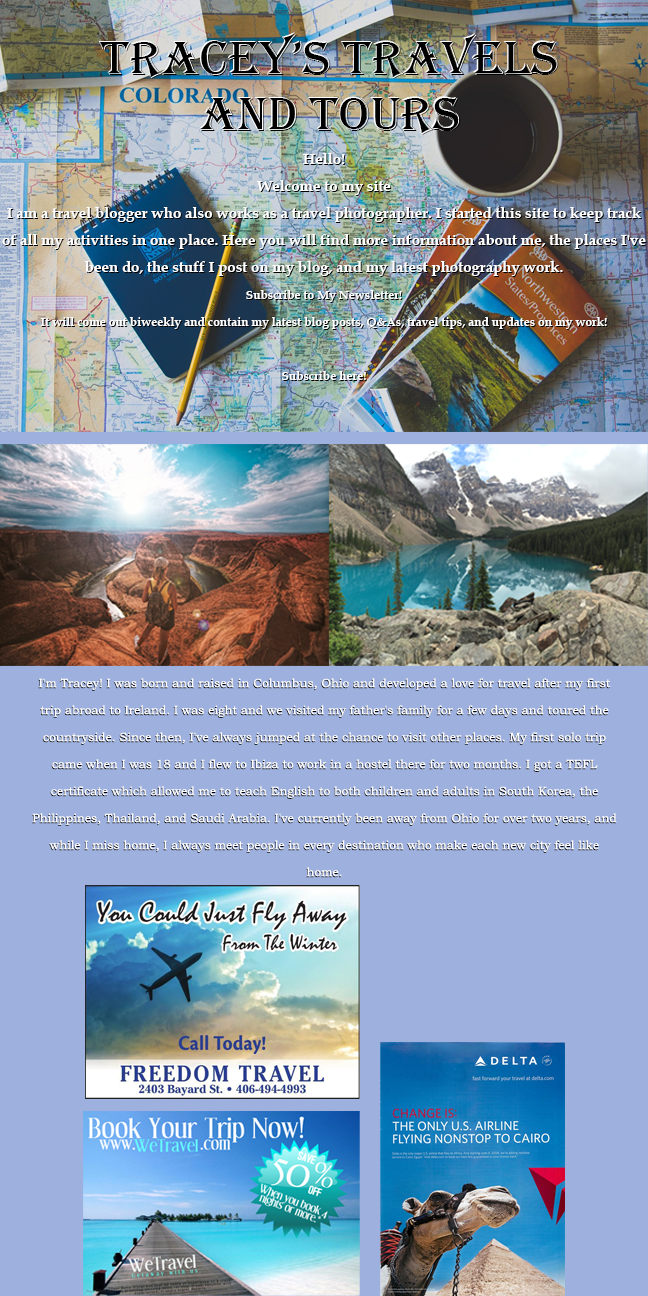
<style>
.page{position:relative;width:648px;height:1296px;background:#9eb0dd}
.page>*{position:absolute;margin:0}
.t1{font:50px/56px "Algerian";color:#000000}
.t2{font:15px/27px "BookAntiqua-Bold";color:#ffffff}
.t3{font:12px/27px "BookAntiqua-Bold";color:#ffffff}
.t4{font:15px/27px "BookAntiqua-Bold";color:#000000}
.t5{font:12px/27px "BookmanOldStyle";color:#ffffff}
.t6{font:12px/27px "BookmanOldStyle"}
</style>
<div class="page">
<p class="t1" style="left:100px;top:33px;width:459px;height:102px;text-align:center">Tracey’s Travels and Tours</p>
<p class="t2" style="left:2px;top:153px;width:644px;height:227px;text-align:center">Hello!<br>Welcome to my site<br>I am a travel blogger who also works as a travel photographer. I started this site to keep track of all my activities in one place. Here you will find more information about me, the places I've been do, the stuff I post on my blog, and my latest photography work.<br><span class="t3">Subscribe to My Newsletter!<br>It will come out biweekly and contain my latest blog posts, Q&amp;As, travel tips, and updates on my work!<br><br>Subscribe here!<br></span><span class="t4"><br>Please feel free to<br> explore!</span></p>
<p class="t5" style="left:32px;top:678px;width:585px;height:199px;text-align:center">I'm Tracey! I was born and raised in Columbus, Ohio and developed a love for travel after my first trip abroad to Ireland. I was eight and we visited my father's family for a few days and toured the countryside. Since then, I've always jumped at the chance to visit other places. My first solo trip came when I was 18 and I flew to Ibiza to work in a hostel there for two months. I got a TEFL certificate which allowed me to teach English to both children and adults in South Korea, the Philippines, Thailand, and Saudi Arabia. I've currently been away from Ohio for over two years, and while I miss home, I always meet people in every destination who make each new city feel like home.</p>
<p class="t6" style="left:32px;top:679px;width:584px;height:199px;text-align:center">I'm Tracey! I was born and raised in Columbus, Ohio and developed a love for travel after my first trip abroad to Ireland. I was eight and we visited my father's family for a few days and toured the countryside. Since then, I've always jumped at the chance to visit other places. My first solo trip came when I was 18 and I flew to Ibiza to work in a hostel there for two months. I got a TEFL certificate which allowed me to teach English to both children and adults in South Korea, the Philippines, Thailand, and Saudi Arabia. I've currently been away from Ohio for over two years, and while I miss home, I always meet people in every destination who make each new city feel like home.</p>
</div>
